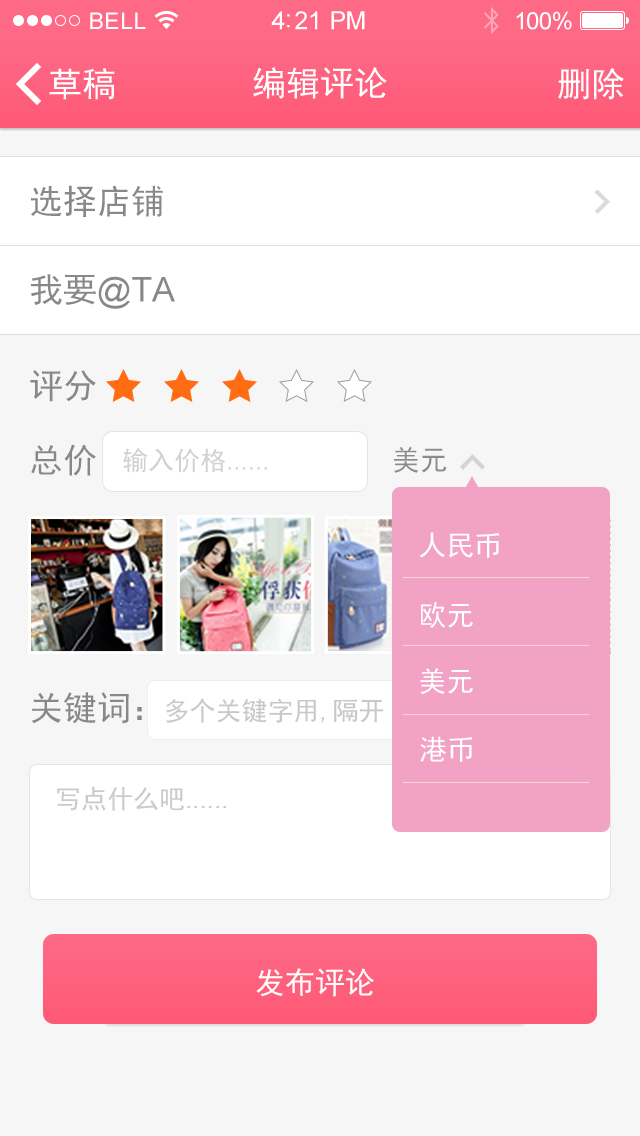
<style>
.page{position:relative;width:640px;height:1136px;background:#f6f6f6}
.page>*{position:absolute;margin:0}
.t1{font:34px "SimHei";color:#888888}
.t2{font:34px "ArialMT";color:#888888}
.t3{font:26px "ArialMT";color:#d1d1d1}
.t4{font:26px "SimHei";color:#d1d1d1}
.t5{font:28px "SimHei";color:#8c8c8c}
.t6{font:28px "SimHei";color:#ffffff}
.t7{font:18px "SimHei";color:#7f93c4}
.t8{font:26px "SimHei";color:#c8c8c8}
.t9{font:26px "ArialMT";color:#cbcbcb}
.t10{font:26px "SimHei";color:#cbcbcb}
.t11{font:30px "SimHei";color:#ffffff}
</style>
<div class="page">
<p class="t1" style="left:31px;top:185px;width:132px;height:32px">选择店铺</p>
<p class="t2" style="left:31px;top:274px;width:144px;height:35px"><span class="t1">我要</span>@TA</p>
<p class="t1" style="left:30px;top:370px;width:66px;height:32px">评分</p>
<p class="t1" style="left:31px;top:444px;width:65px;height:32px">总价</p>
<p class="t3" style="left:123px;top:448px;width:144px;height:25px"><span class="t4">输入价格</span>......</p>
<p class="t5" style="left:394px;top:446px;width:53px;height:27px">美元</p>
<p class="t6" style="left:419px;top:532px;width:81px;height:26px">人民币</p>
<p class="t6" style="left:421px;top:602px;width:52px;height:26px">欧元</p>
<p class="t7" style="left:360px;top:622px;width:9px;height:9px">+</p>
<p class="t6" style="left:420px;top:668px;width:53px;height:26px">美元</p>
<p class="t1" style="left:31px;top:692px;width:111px;height:32px">关键词：</p>
<p class="t8" style="left:166px;top:698px;width:218px;height:25px">多个关键字用,隔开</p>
<p class="t6" style="left:420px;top:736px;width:53px;height:26px">港币</p>
<p class="t9" style="left:57px;top:786px;width:169px;height:25px"><span class="t10">写点什么吧</span>......</p>
<p class="t11" style="left:256px;top:968px;width:118px;height:29px">发布评论</p>
</div>
